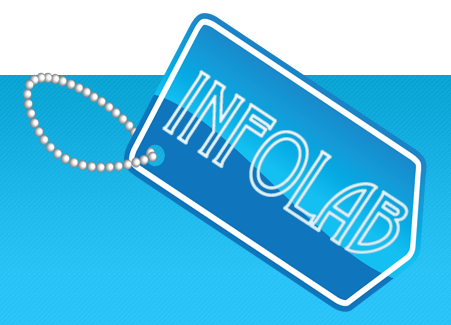
<style>
.page{position:relative;width:451px;height:325px;background:#ffffff}
.page>*{position:absolute;margin:0}
.t1{font:134px "Desdemona";letter-spacing:-0.05em;font-variant:small-caps;font-weight:bold;scale:0.85 1}
</style>
<div class="page">
<p class="t1" style="left:162px;top:70px;width:247px;height:184px;rotate:33deg">infolab</p>
</div>
